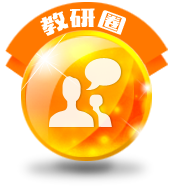
<style>
.page{position:relative;width:180px;height:189px;background:#ffffff}
.page>*{position:absolute;margin:0}
.t1{font:27.2px "MFWenYan_Noncommercial-Regular";color:#ffffff}
</style>
<div class="page">
<p class="t1" style="left:40px;top:8px;width:86px;height:28px;rotate:-2deg">教研圈</p>
</div>
